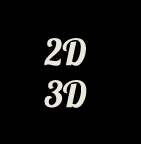
<style>
.page{position:relative;width:141px;height:144px;background:#000000}
.page>*{position:absolute;margin:0}
.t1{font:36px "Lobster1.4";color:#eae7dd}
</style>
<div class="page">
<p class="t1" style="left:44px;top:38px;width:42px;height:28px">2D</p>
<p class="t1" style="left:44px;top:80px;width:43px;height:28px">3D</p>
</div>
